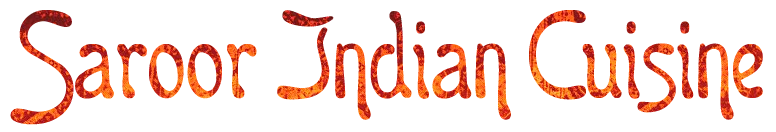
<style>
.page{position:relative;width:776px;height:132px;background:#ffffff}
.page>*{position:absolute;margin:0}
.t1{font:144px "Boomerang"}
</style>
<div class="page">
<p class="t1" style="left:10px;top:10px;width:753px;height:115px">Saroor Indian Cuisine</p>
</div>
